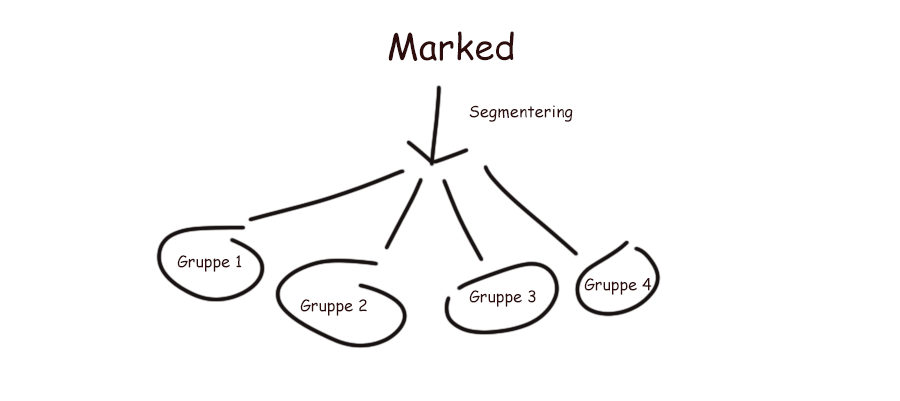
<style>
.page{position:relative;width:900px;height:401px;background:#ffffff}
.page>*{position:absolute;margin:0}
.t1{font:36px "ComicSansMS";letter-spacing:0.005em;color:#2d0c0c}
.t2{font:16px "ComicSansMS";letter-spacing:0.005em;color:#2d0c0c}
</style>
<div class="page">
<p class="t1" style="left:388px;top:31px;width:126px;height:30px">Marked</p>
<p class="t2" style="left:469px;top:105px;width:104px;height:17px">Segmentering</p>
<p class="t2" style="left:177px;top:255px;width:65px;height:17px">Gruppe 1</p>
<p class="t2" style="left:584px;top:278px;width:68px;height:17px">Gruppe 4</p>
<p class="t2" style="left:469px;top:290px;width:67px;height:17px">Gruppe 3</p>
<p class="t2" style="left:300px;top:299px;width:67px;height:17px">Gruppe 2</p>
</div>
